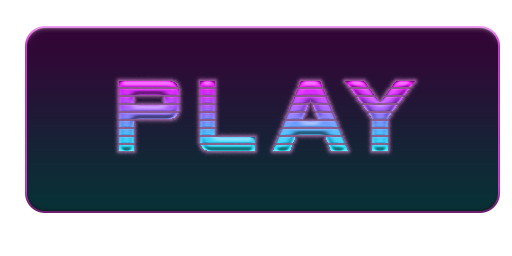
<style>
.page{position:relative;width:512px;height:256px;background:#ffffff}
.page>*{position:absolute;margin:0}
.t1{font:100px "AlienEncounters";letter-spacing:0.15em}
</style>
<div class="page">
<p class="t1" style="left:119px;top:81px;width:296px;height:70px">PLAY</p>
</div>
